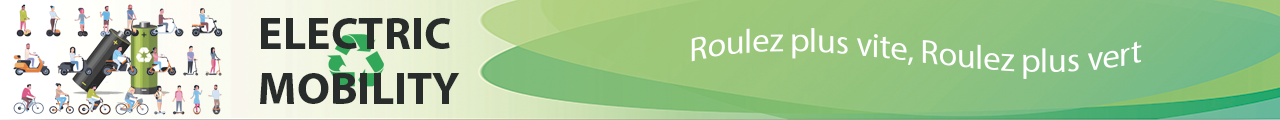
<style>
.page{position:relative;width:1280px;height:120px}
.page>*{position:absolute;margin:0}
.t1{font:45.8px "MyriadPro-Bold";color:#282c2a}
.t2{font:33.3px "MyriadPro-Regular";color:#ffffff}
</style>
<div class="page">
<p class="t1" style="left:260px;top:18px;width:200px;height:86px">ELECTRIC<br>MOBILITY</p>
<p class="t2" style="left:691px;top:28px;width:451px;height:51px">Roulez plus vite, Roulez plus vert</p>
</div>
